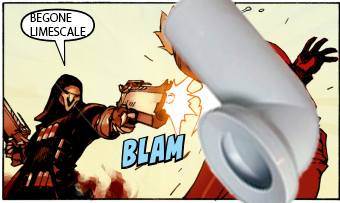
<style>
.page{position:relative;width:340px;height:203px}
.page>*{position:absolute;margin:0}
.t1{font:12px "MyriadPro-Regular";color:#000000}
</style>
<div class="page">
<p class="t1" style="left:30px;top:13px;width:56px;height:23px">BEGONE<br>LIMESCALE</p>
</div>
